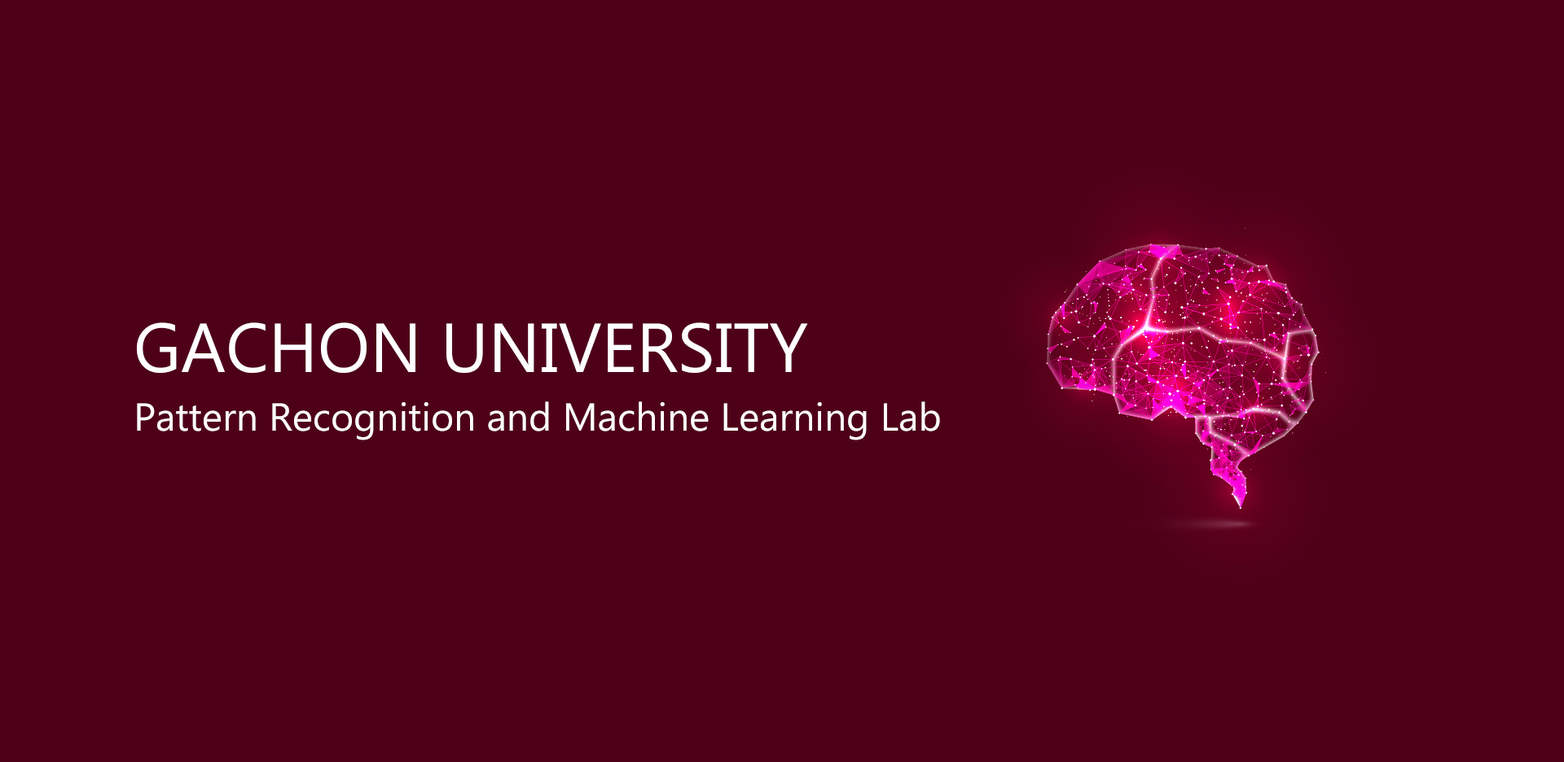
<style>
.page{position:relative;width:1564px;height:762px;background:#4f0019}
.page>*{position:absolute;margin:0}
.t1{font:39.1px/58.6px "Ebrima";color:#ffffff}
.t2{font:69.2px/58.6px "Ebrima";color:#ffffff}
</style>
<div class="page">
<p class="t1" style="left:137px;top:323px;width:803px;height:118px;text-align:right"><span class="t2">GACHON UNIVERSITY<br></span>Pattern Recognition and Machine Learning Lab</p>
</div>
